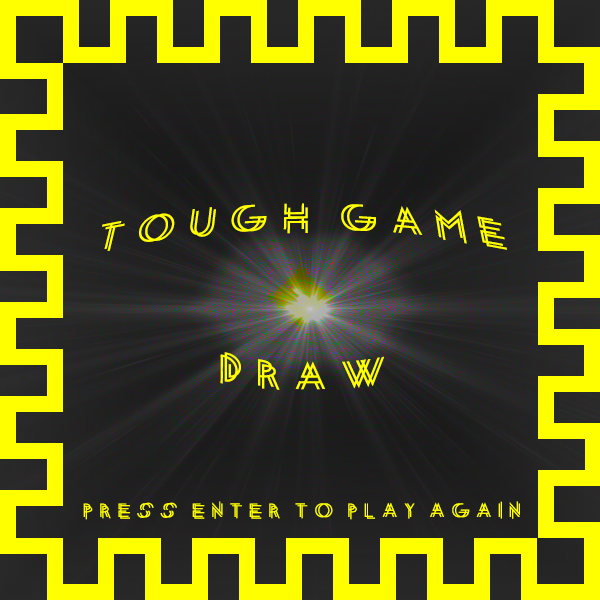
<style>
.page{position:relative;width:600px;height:600px;background:#ffff00}
.page>*{position:absolute;margin:0}
.t1{font:53.3px "entanglement";color:#ffff00}
.t2{font:26.7px "entanglement";color:#ffff00}
</style>
<div class="page">
<p class="t1" style="left:102px;top:203px;width:405px;height:48px">Tough game</p>
<p class="t1" style="left:220px;top:352px;width:164px;height:38px">draw</p>
<p class="t2" style="left:83px;top:501px;width:437px;height:19px">Press enter to play again</p>
</div>
